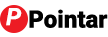
<style>
.page{position:relative;width:108px;height:37px;background:#ffffff}
.page>*{position:absolute;margin:0}
.t1{font:24px "Roboto-BoldItalic";letter-spacing:0.05em;color:#ffffff}
.t2{font:24px "Roboto-Black";color:#000000}
</style>
<div class="page">
<p class="t1" style="left:6px;top:8px;width:16px;height:18px">P</p>
<p class="t2" style="left:29px;top:9px;width:79px;height:19px">Pointar</p>
</div>
